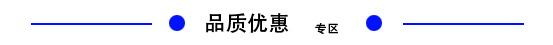
<style>
.page{position:relative;width:553px;height:45px;background:#ffffff}
.page>*{position:absolute;margin:0}
.t1{font:21.3px "AdobeHeitiStd-Regular";color:#000000}
.t2{font:12px "AdobeHeitiStd-Regular";color:#000000}
</style>
<div class="page">
<p class="t1" style="left:206px;top:13px;width:83px;height:20px">品质优惠</p>
<p class="t2" style="left:315px;top:23px;width:23px;height:12px">专区</p>
</div>
